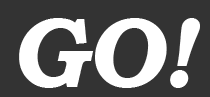
<style>
.page{position:relative;width:210px;height:97px;background:#333333}
.page>*{position:absolute;margin:0}
.t1{font:100px "BookmanOldStyle-BoldItalic";color:#ffffff}
</style>
<div class="page">
<p class="t1" style="left:19px;top:18px;width:181px;height:70px">GO!”!</p>
</div>
